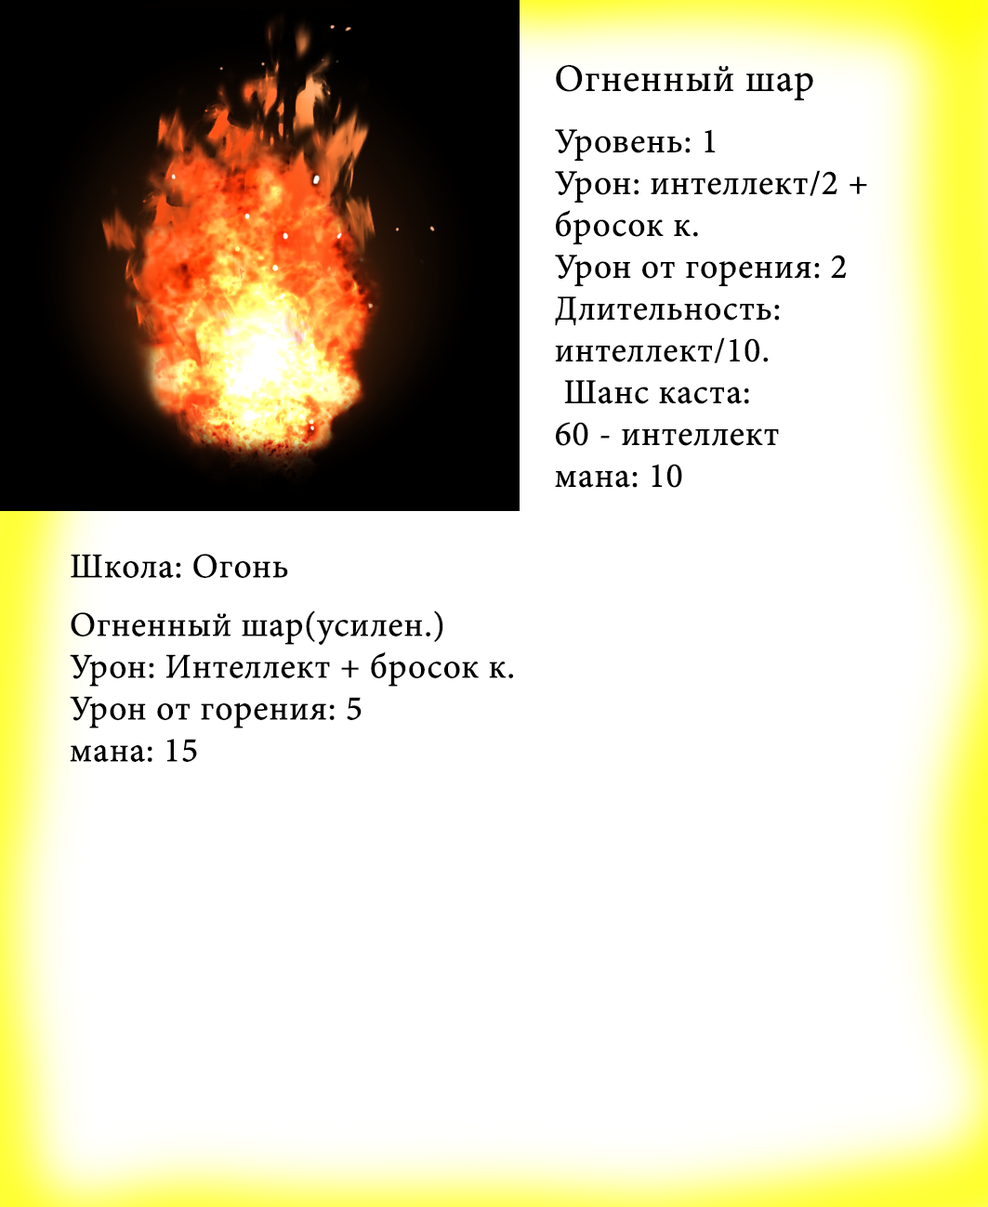
<style>
.page{position:relative;width:988px;height:1207px;background:#ffffff}
.page>*{position:absolute;margin:0}
.t1{font:38.7px "MinionPro-Regular";color:#000000;font-weight:bold}
.t2{font:34.8px "MinionPro-Regular";color:#000000;font-weight:bold}
</style>
<div class="page">
<p class="t1" style="left:556px;top:65px;width:257px;height:35px">Огненный шар</p>
<p class="t2" style="left:555px;top:129px;width:312px;height:359px">Уровень: 1<br>Урон: интеллект/2 + бросок к.<br>Урон от горения: 2<br>Длительность:<br>интеллект/10.<br> Шанс каста: <br>60 - интеллект <br>мана: 10</p>
<p class="t2" style="left:71px;top:554px;width:217px;height:24px">Школа: Огонь</p>
<p class="t2" style="left:70px;top:611px;width:443px;height:151px">Огненный шар(усилен.)<br>Урон: Интеллект + бросок к.<br>Урон от горения: 5<br>мана: 15</p>
</div>
